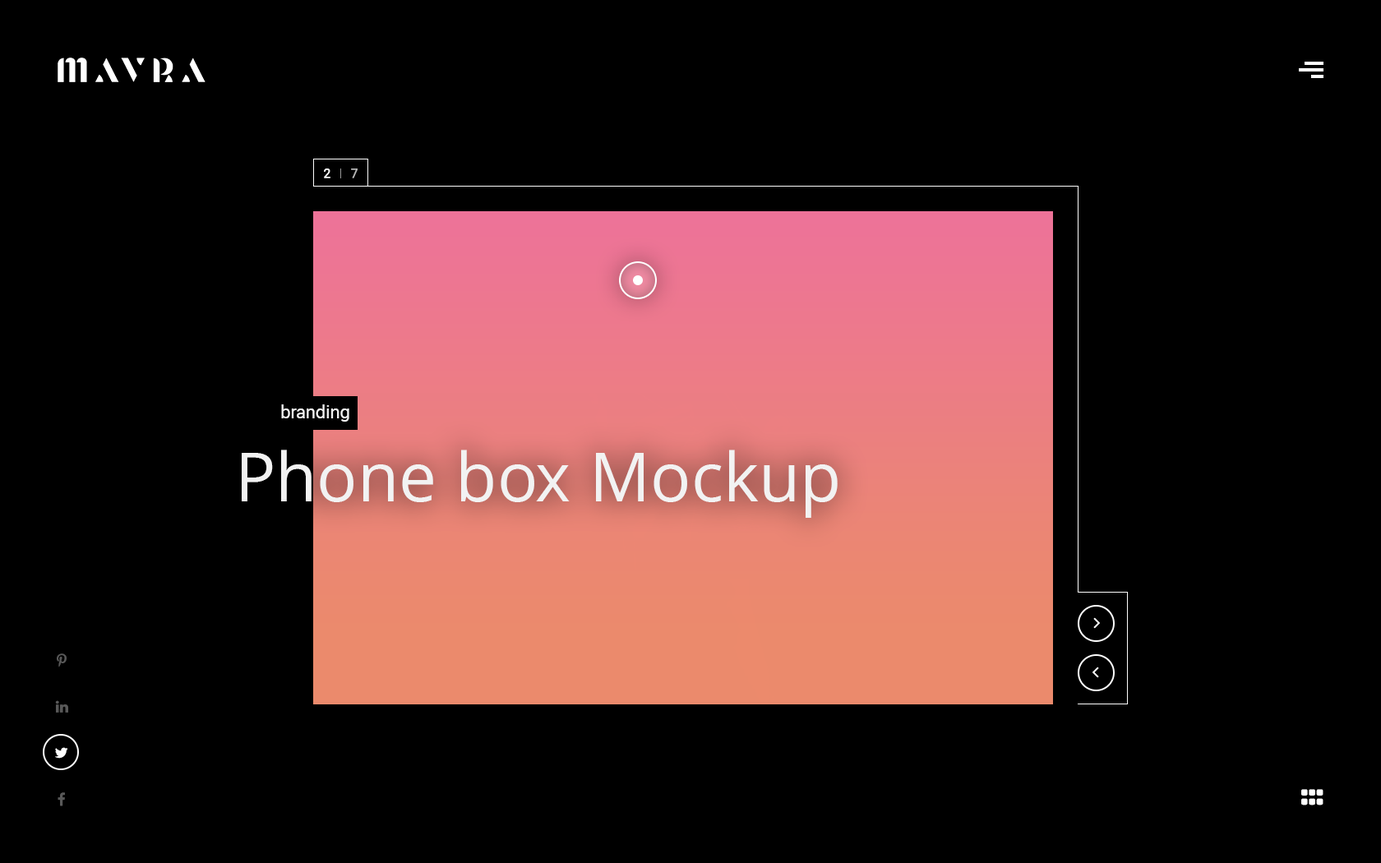
<style>
.page{position:relative;width:1381px;height:863px;background:#000000}
.page>*{position:absolute;margin:0}
.t1{font:12.3px "Roboto-Light";letter-spacing:0.2em;color:#ffffff;font-weight:bold}
.t2{font:12.3px "Roboto-Light";letter-spacing:0.2em;color:#b8b8b8;font-weight:bold}
.t3{font:18.1px "Roboto-Regular";color:#f2f2f2}
.t4{font:72.4px "Khula-Regular";color:#f2f2f2}
</style>
<div class="page">
<p class="t1" style="left:324px;top:169px;width:7px;height:9px">2</p>
<p class="t2" style="left:351px;top:169px;width:7px;height:9px">7</p>
<p class="t3" style="left:281px;top:405px;width:68px;height:17px">branding</p>
<p class="t4" style="left:242px;top:450px;width:596px;height:68px">Phone box Mockup</p>
</div>
